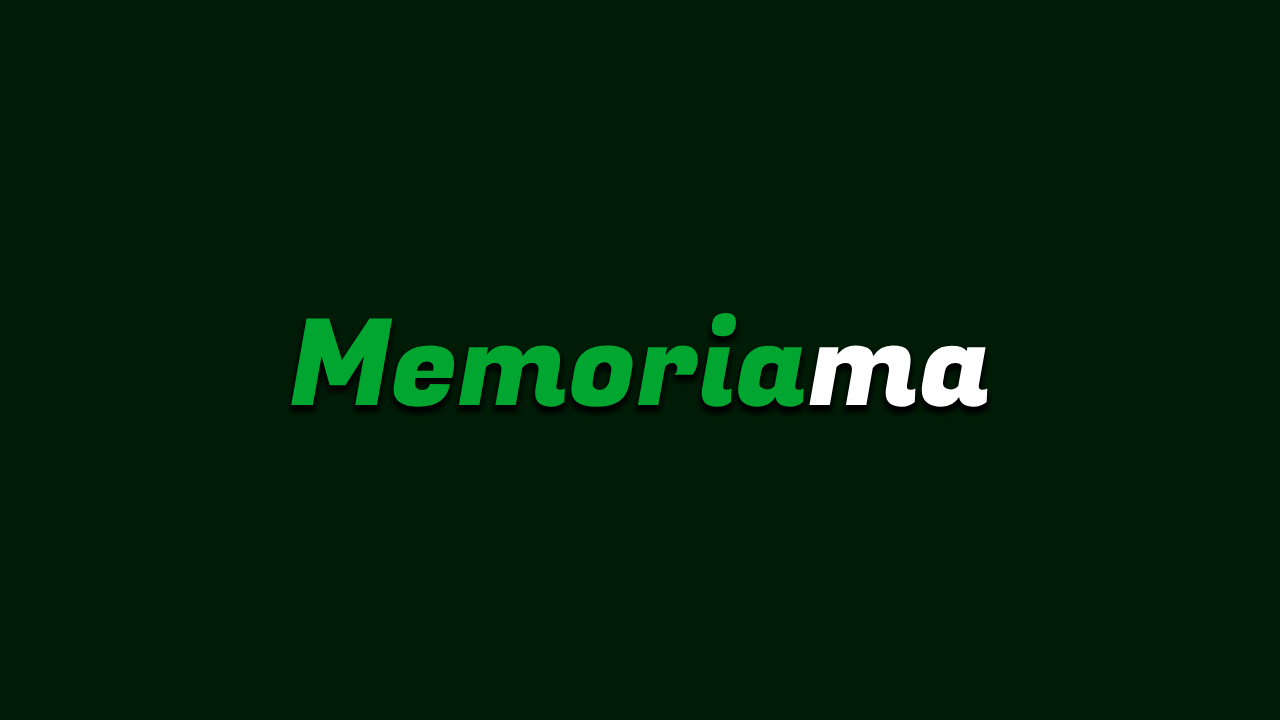
<style>
.page{position:relative;width:1280px;height:720px;background:#001b06}
.page>*{position:absolute;margin:0}
.t1{font:120px "FugazOne-Regular";color:#00a62f}
.t2{font:120px "FugazOne-Regular";color:#ffffff}
</style>
<div class="page">
<p class="t1" style="left:291px;top:312px;width:697px;height:95px">Memoria<span class="t2">ma</span></p>
</div>
